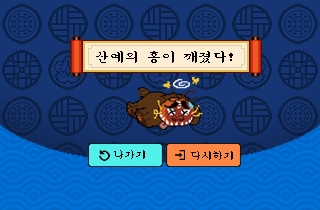
<style>
.page{position:relative;width:320px;height:210px;background:#153574}
.page>*{position:absolute;margin:0}
.t1{font:14.7px "Sam3KRFont";color:#000000}
.t2{font:11px "Sam3KRFont";color:#000000}
</style>
<div class="page">
<p class="t1" style="left:96px;top:51px;width:137px;height:12px">산예의 흥이 깨졌다!</p>
<p class="t2" style="left:114px;top:150px;width:31px;height:9px">나가기</p>
<p class="t2" style="left:191px;top:151px;width:42px;height:9px">다시하기</p>
</div>
